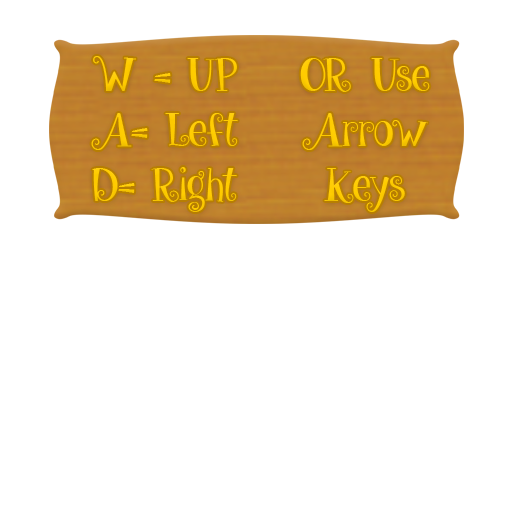
<style>
.page{position:relative;width:512px;height:512px;background:#ffffff}
.page>*{position:absolute;margin:0}
.t1{font:45.8px "give_me_some_sugar";color:#ffcc00}
</style>
<div class="page">
<p class="t1" style="left:91px;top:56px;width:147px;height:156px;text-align:center">W = UP<br>A= Left<br>D= Right</p>
<p class="t1" style="left:300px;top:58px;width:130px;height:154px;text-align:center">OR Use<br>Arrow<br>Keys</p>
</div>
